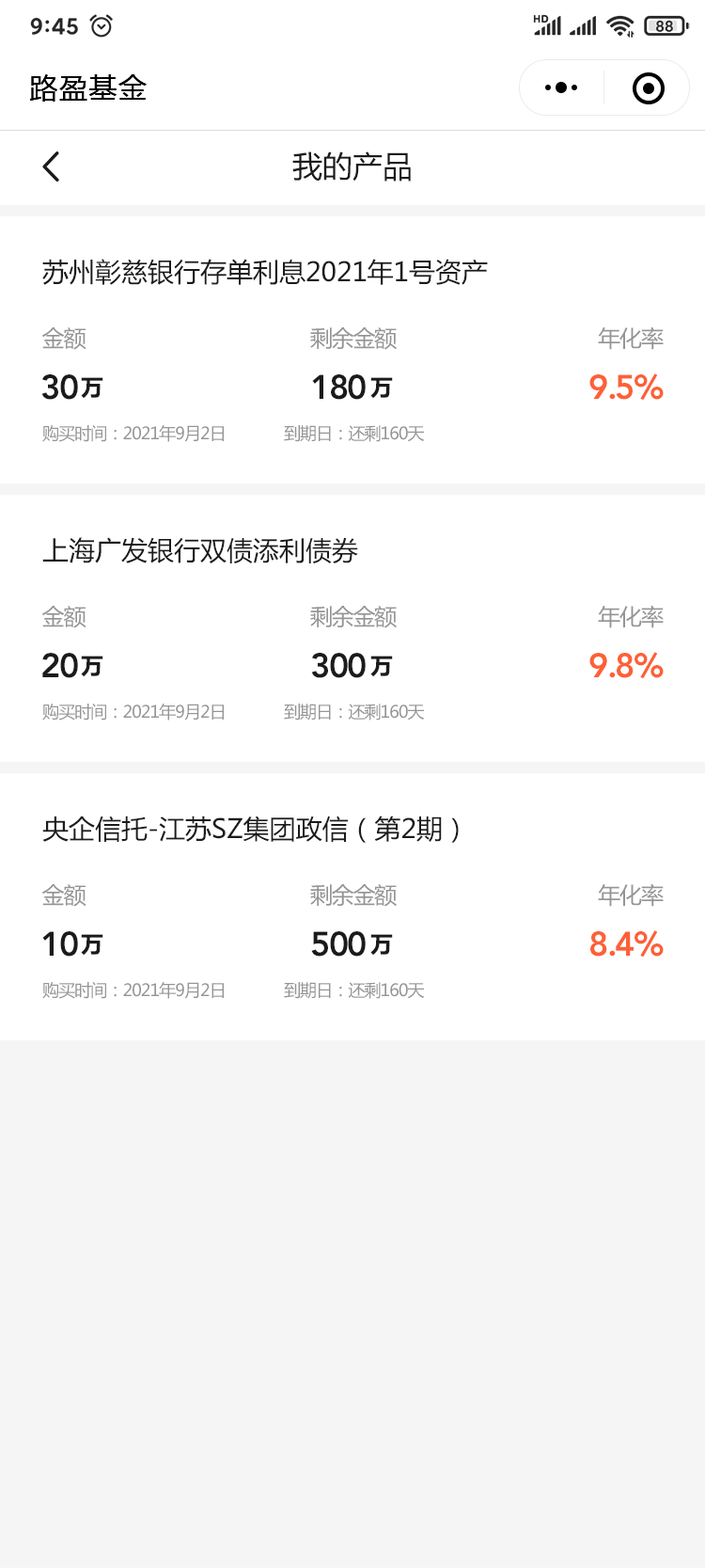
<style>
.page{position:relative;width:705px;height:1568px;background:#ffffff}
.page>*{position:absolute;margin:0}
.t1{font:28.2px "MicrosoftYaHei";letter-spacing:0.05em;color:#000000}
.t2{font:30.1px "MicrosoftYaHei";color:#1b1b1b}
.t3{font:26.3px "MicrosoftYaHei";color:#1b1b1b}
.t4{font:22.6px "MicrosoftYaHei";letter-spacing:-0.05em;color:#959595}
.t5{font:33.9px "AvenirLTStd-Heavy";letter-spacing:-0.05em;color:#1b1b1b}
.t6{font:22.6px "MicrosoftYaHei-Bold";letter-spacing:-0.05em;color:#1b1b1b}
.t7{font:33.9px "AvenirLTStd-Heavy";letter-spacing:-0.05em;color:#fd6036}
.t8{font:16.9px "MicrosoftYaHei";letter-spacing:-0.05em;color:#959595}
</style>
<div class="page">
<p class="t1" style="left:29px;top:74px;width:118px;height:28px">路盈基金</p>
<p class="t2" style="left:293px;top:151px;width:118px;height:31px">我的产品</p>
<p class="t3" style="left:42px;top:259px;width:446px;height:26px">苏州彰慈银行存单利息2021年1号资产</p>
<p class="t4" style="left:41px;top:327px;width:46px;height:23px">金额</p>
<p class="t4" style="left:310px;top:327px;width:87px;height:23px">剩余金额</p>
<p class="t4" style="left:598px;top:326px;width:66px;height:24px">年化率</p>
<p class="t5" style="left:41px;top:374px;width:37px;height:26px">30</p>
<p class="t6" style="left:81px;top:377px;width:22px;height:22px">万</p>
<p class="t5" style="left:312px;top:374px;width:54px;height:26px">180</p>
<p class="t6" style="left:371px;top:377px;width:22px;height:22px">万</p>
<p class="t7" style="left:590px;top:373px;width:74px;height:28px">9.5%</p>
<p class="t8" style="left:42px;top:425px;width:182px;height:17px">购买时间：2021年9月2日</p>
<p class="t8" style="left:284px;top:425px;width:141px;height:17px">到期日：还剩160天</p>
<p class="t3" style="left:42px;top:537px;width:316px;height:26px">上海广发银行双债添利债券</p>
<p class="t4" style="left:41px;top:606px;width:46px;height:22px">金额</p>
<p class="t4" style="left:310px;top:606px;width:87px;height:22px">剩余金额</p>
<p class="t4" style="left:598px;top:605px;width:66px;height:23px">年化率</p>
<p class="t5" style="left:42px;top:653px;width:36px;height:25px">20</p>
<p class="t5" style="left:311px;top:653px;width:55px;height:25px">300</p>
<p class="t7" style="left:590px;top:652px;width:74px;height:27px">9.8%</p>
<p class="t6" style="left:81px;top:656px;width:22px;height:21px">万</p>
<p class="t6" style="left:371px;top:656px;width:22px;height:21px">万</p>
<p class="t8" style="left:42px;top:704px;width:182px;height:17px">购买时间：2021年9月2日</p>
<p class="t8" style="left:284px;top:704px;width:141px;height:17px">到期日：还剩160天</p>
<p class="t3" style="left:42px;top:816px;width:417px;height:27px">央企信托-江苏SZ集团政信（第2期）</p>
<p class="t4" style="left:41px;top:884px;width:46px;height:23px">金额</p>
<p class="t4" style="left:310px;top:884px;width:87px;height:23px">剩余金额</p>
<p class="t4" style="left:598px;top:883px;width:66px;height:24px">年化率</p>
<p class="t5" style="left:42px;top:931px;width:36px;height:26px">10</p>
<p class="t6" style="left:81px;top:934px;width:22px;height:22px">万</p>
<p class="t5" style="left:311px;top:931px;width:55px;height:26px">500</p>
<p class="t6" style="left:371px;top:934px;width:22px;height:22px">万</p>
<p class="t7" style="left:591px;top:930px;width:73px;height:28px">8.4%</p>
<p class="t8" style="left:42px;top:982px;width:182px;height:17px">购买时间：2021年9月2日</p>
<p class="t8" style="left:284px;top:982px;width:141px;height:17px">到期日：还剩160天</p>
</div>
